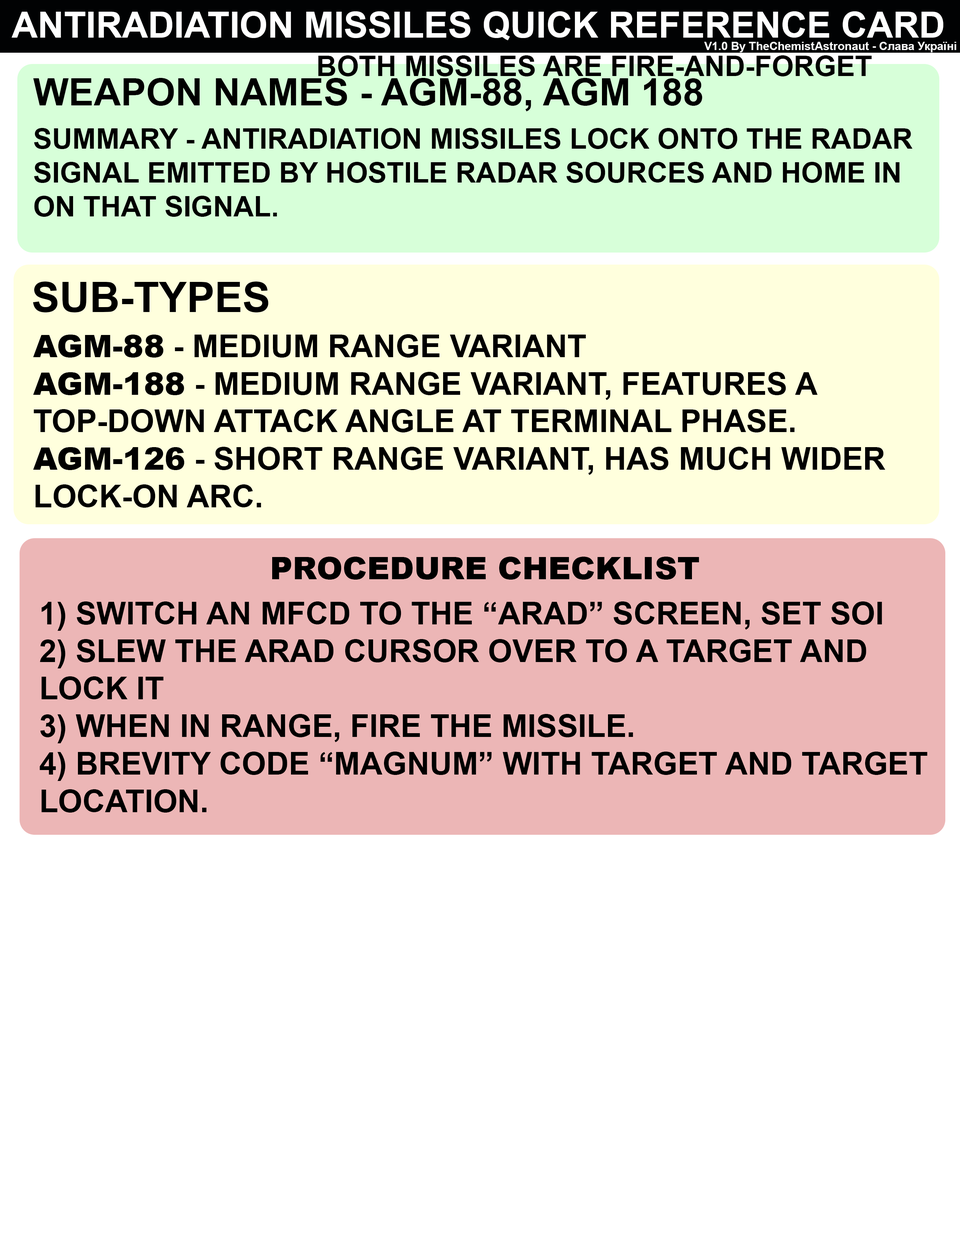
<style>
.page{position:relative;width:960px;height:1242px;background:#ffffff}
.page>*{position:absolute;margin:0}
.t1{font:36.1px "Arial-BoldMT";color:#ffffff}
.t2{font:11.5px "Arial-BoldMT";color:#ffffff}
.t3{font:28.2px "Arial-BoldMT";color:#000000}
.t4{font:37.6px "Arial-BoldMT";color:#000000}
.t5{font:41.7px "Arial-BoldMT";color:#000000}
.t6{font:31.3px "Arial-BoldMT";color:#000000}
.t7{font:31.3px "Arial-Black";color:#000000}
.t8{font:31.4px "Arial-Black";color:#000000}
</style>
<div class="page">
<p class="t1" style="left:11px;top:11px;width:932px;height:29px">ANTIRADIATION MISSILES QUICK REFERENCE CARD</p>
<p class="t2" style="left:704px;top:42px;width:252px;height:10px">V1.0 By TheChemistAstronaut - Слава Україні</p>
<p class="t3" style="left:318px;top:55px;width:554px;height:21px">BOTH MISSILES ARE FIRE-AND-FORGET</p>
<p class="t4" style="left:33px;top:78px;width:669px;height:33px">WEAPON NAMES - AGM-88, AGM 188</p>
<p class="t3" style="left:34px;top:128px;width:878px;height:89px">SUMMARY - ANTIRADIATION MISSILES LOCK ONTO THE RADAR SIGNAL EMITTED BY HOSTILE RADAR SOURCES AND HOME IN ON THAT SIGNAL.</p>
<p class="t5" style="left:33px;top:282px;width:235px;height:30px">SUB-TYPES</p>
<p class="t6" style="left:33px;top:334px;width:852px;height:174px"><span class="t7">AGM-88</span> - MEDIUM RANGE VARIANT<br><span class="t7">AGM-188</span> - MEDIUM RANGE VARIANT, FEATURES A TOP-DOWN ATTACK ANGLE AT TERMINAL PHASE.<br><span class="t7">AGM-126</span> - SHORT RANGE VARIANT, HAS MUCH WIDER LOCK-ON ARC.</p>
<p class="t8" style="left:272px;top:557px;width:427px;height:23px">PROCEDURE CHECKLIST</p>
<p class="t6" style="left:40px;top:602px;width:887px;height:211px">1) SWITCH AN MFCD TO THE “ARAD” SCREEN, SET SOI<br>2) SLEW THE ARAD CURSOR OVER TO A TARGET AND LOCK IT<br>3) WHEN IN RANGE, FIRE THE MISSILE. <br>4) BREVITY CODE “MAGNUM” WITH TARGET AND TARGET LOCATION.</p>
</div>
